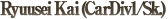
<style>
.page{position:relative;width:168px;height:19px;background:#ffffff}
.page>*{position:absolute;margin:0}
.t1{font:18px "RyuminPro-ExBold";letter-spacing:-0.12em;color:#4a3f32;font-weight:bold;scale:0.9 1}
</style>
<div class="page">
<p class="t1" style="left:0px;top:1px;width:166px;height:18px">Ryuusei Kai (CarDiv1/Sk.)</p>
</div>
